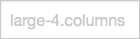
<style>
.page{position:relative;width:140px;height:39px;background:#ffffff}
.page>*{position:absolute;margin:0}
.t1{font:12px "MyriadPro-Regular";color:#cacaca}
</style>
<div class="page">
<p class="t1" style="left:10px;top:14px;width:115px;height:16px">large-4.columns</p>
</div>
